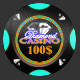
<style>
.page{position:relative;width:80px;height:80px;background:#333333}
.page>*{position:absolute;margin:0}
.t1{font:10.8px/3.6px "EdwardianScriptITC";color:#fda047}
.t2{font:6.3px/5.4px "Castellar";color:#fda047;scale:1.5 1}
.t3{font:10.6px "BernardMT-Condensed";color:#e19012;scale:1.22 1}
</style>
<div class="page">
<p class="t1" style="left:19px;top:30px;width:41px;height:14px;text-align:justify">Diamond<br><span class="t2">CASINO</span></p>
<p class="t3" style="left:28px;top:45px;width:25px;height:10px">100$</p>
</div>
